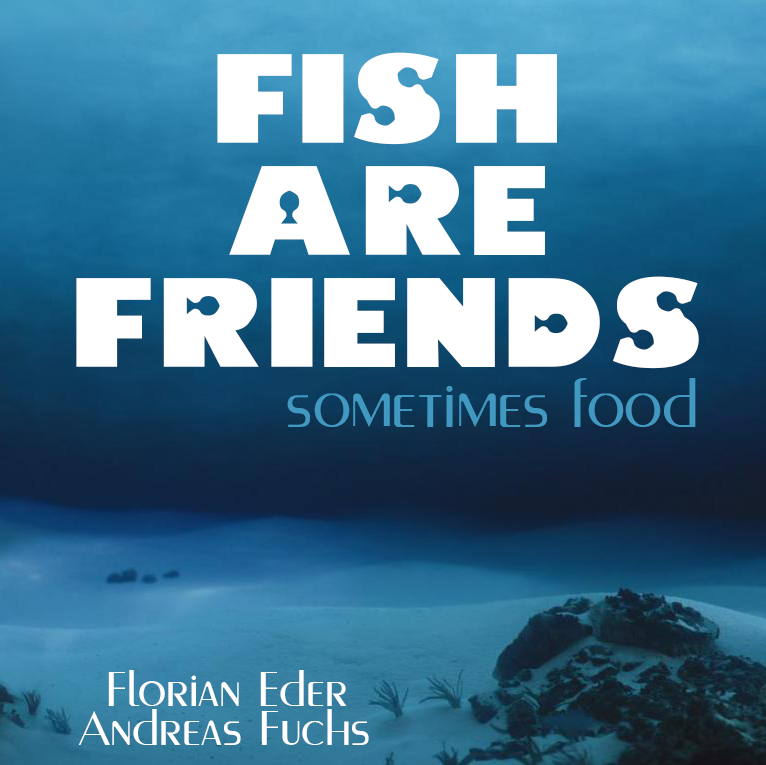
<style>
.page{position:relative;width:766px;height:765px}
.page>*{position:absolute;margin:0}
.t1{font:175.6px/112px "Findet-Nemo-Regular";color:#ffffff}
.t2{font:64.7px "MontereyFLF";color:#4199c1}
.t3{font:48px "MontereyFLF";color:#ffffff}
</style>
<div class="page">
<p class="t1" style="left:76px;top:52px;width:623px;height:317px;text-align:center">fish<br>are<br>friends</p>
<p class="t2" style="left:287px;top:378px;width:409px;height:49px">sometimes food</p>
<p class="t3" style="left:108px;top:670px;width:239px;height:36px">Florian Eder</p>
<p class="t3" style="left:78px;top:709px;width:291px;height:36px">Andreas Fuchs</p>
</div>
